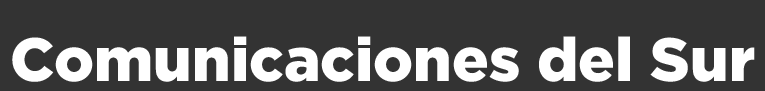
<style>
.page{position:relative;width:765px;height:91px;background:#333333}
.page>*{position:absolute;margin:0}
.t1{font:61px "Gotham-Black";color:#ffffff}
</style>
<div class="page">
<p class="t1" style="left:12px;top:36px;width:743px;height:46px">Comunicaciones del Sur</p>
</div>
